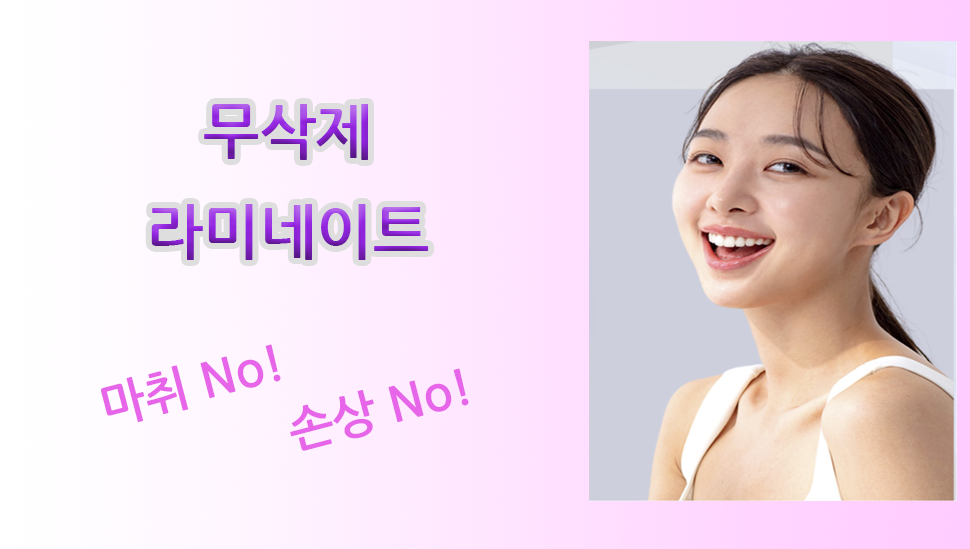
<style>
.page{position:relative;width:970px;height:549px}
.page>*{position:absolute;margin:0}
.t1{font:60px/100px "NanumGothicBold"}
.t2{font:48px "NanumGothicBold";color:#e765e9}
</style>
<div class="page">
<p class="t1" style="left:151px;top:104px;width:278px;height:156px;text-align:center">무삭제<br>라미네이트</p>
<p class="t2" style="left:101px;top:344px;width:180px;height:79px;rotate:-15deg">마취 No!</p>
<p class="t2" style="left:290px;top:368px;width:179px;height:83px;rotate:-15deg">손상 No!</p>
</div>
